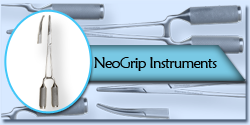
<style>
.page{position:relative;width:250px;height:125px}
.page>*{position:absolute;margin:0}
.t1{font:15px "MaiandraGD-Regular";letter-spacing:-0.05em;color:#000000}
</style>
<div class="page">
<p class="t1" style="left:94px;top:57px;width:123px;height:14px">NeoGrip Instruments</p>
</div>
